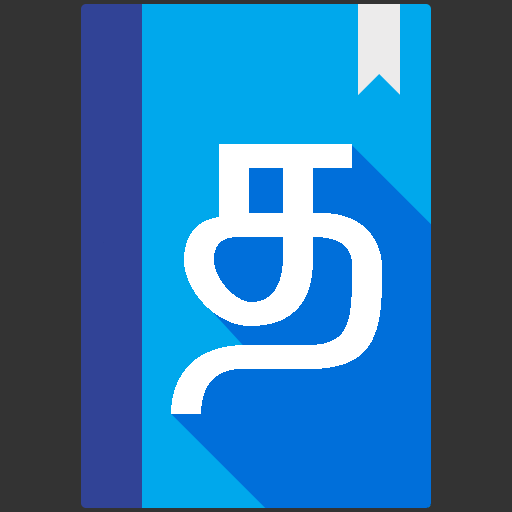
<style>
.page{position:relative;width:512px;height:512px;background:#333333}
.page>*{position:absolute;margin:0}
.t1{font:282.2px "Latha";color:#ffffff}
</style>
<div class="page">
<p class="t1" style="left:171px;top:144px;width:211px;height:270px">த</p>
</div>
